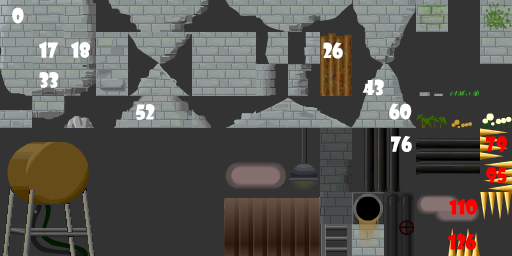
<style>
.page{position:relative;width:512px;height:256px;background:#333333}
.page>*{position:absolute;margin:0}
.t1{font:20px "ShowcardGothic-Reg";color:#ffffff}
.t2{font:20px "ShowcardGothic-Reg";color:#ff0000}
</style>
<div class="page">
<p class="t1" style="left:12px;top:7px;width:12px;height:17px">0</p>
<p class="t1" style="left:39px;top:41px;width:19px;height:17px">17</p>
<p class="t1" style="left:71px;top:41px;width:19px;height:17px">18</p>
<p class="t1" style="left:323px;top:42px;width:20px;height:17px">26</p>
<p class="t1" style="left:39px;top:72px;width:20px;height:16px">33</p>
<p class="t1" style="left:362px;top:79px;width:22px;height:17px">43</p>
<p class="t1" style="left:135px;top:104px;width:20px;height:16px">52</p>
<p class="t1" style="left:389px;top:103px;width:23px;height:17px">60</p>
<p class="t1" style="left:391px;top:136px;width:21px;height:16px">76</p>
<p class="t2" style="left:486px;top:136px;width:21px;height:16px">79</p>
<p class="t2" style="left:486px;top:167px;width:21px;height:16px">95</p>
<p class="t2" style="left:449px;top:198px;width:28px;height:17px">110</p>
<p class="t2" style="left:448px;top:233px;width:28px;height:17px">126</p>
</div>
